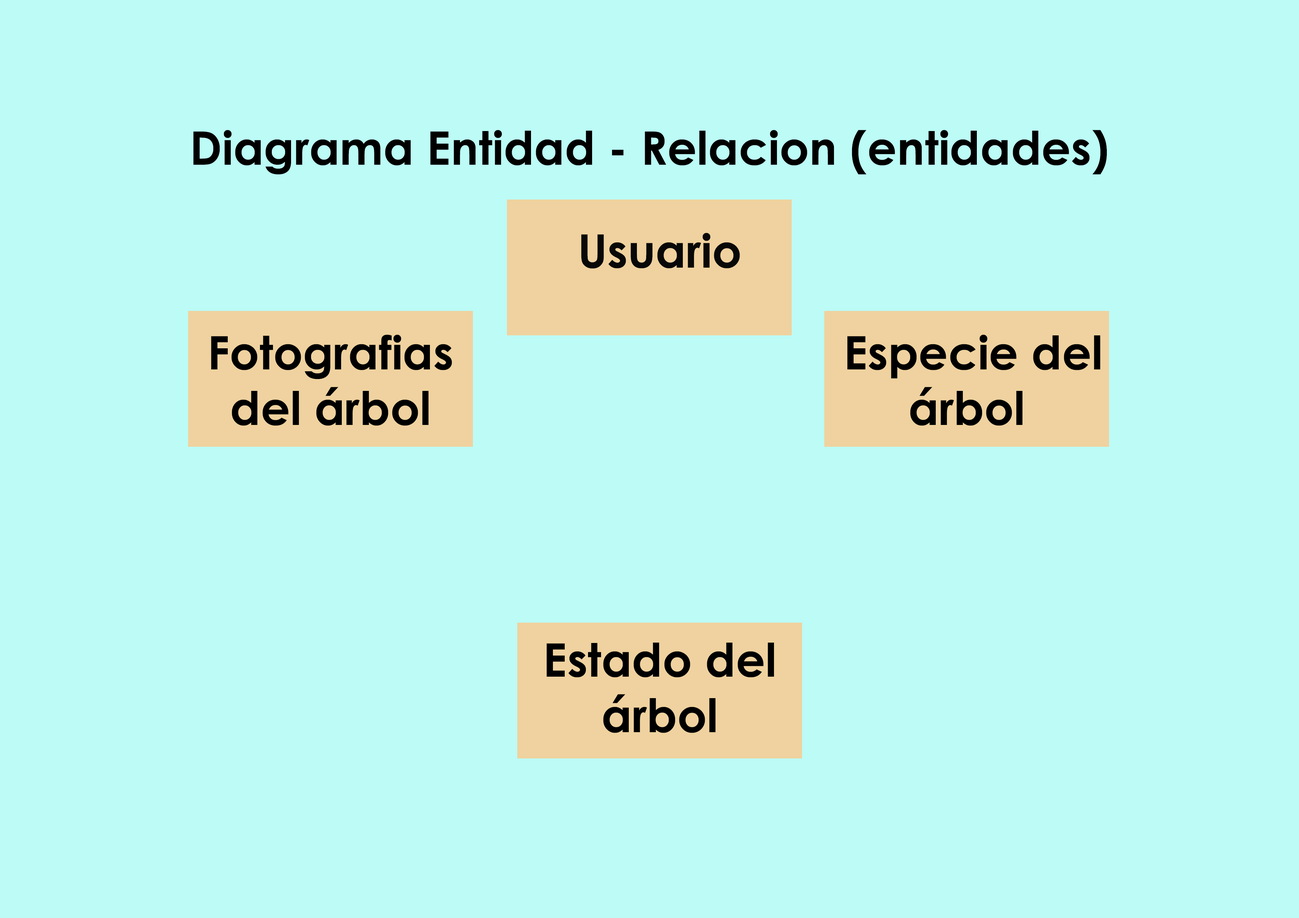
<style>
.page{position:relative;width:1299px;height:918px;background:#bcfbf6}
.page>*{position:absolute;margin:0}
.t1{font:46.3px "CenturyGothic-Bold";color:#000000}
.t2{font:46.3px "CenturyGothic-Bold";color:#080808}
</style>
<div class="page">
<p class="t1" style="left:193px;top:130px;width:914px;height:44px">Diagrama Entidad - Relacion (entidades)</p>
<p class="t2" style="left:581px;top:233px;width:159px;height:36px">Usuario</p>
<p class="t1" style="left:211px;top:335px;width:241px;height:91px;text-align:center">Fotografias<br>del árbol</p>
<p class="t1" style="left:847px;top:335px;width:253px;height:91px;text-align:center">Especie del árbol</p>
<p class="t1" style="left:546px;top:643px;width:228px;height:90px;text-align:center">Estado del<br>árbol</p>
</div>
